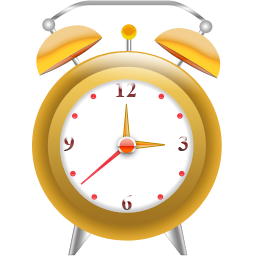
<style>
.page{position:relative;width:256px;height:256px;background:#ffffff}
.page>*{position:absolute;margin:0}
.t1{font:22.3px "TimesNewRomanPS-BoldMT"}
</style>
<div class="page">
<p class="t1" style="left:116px;top:82px;width:20px;height:15px">12</p>
<p class="t1" style="left:64px;top:136px;width:10px;height:15px">9</p>
<p class="t1" style="left:178px;top:136px;width:10px;height:15px">3</p>
<p class="t1" style="left:122px;top:195px;width:10px;height:15px">6</p>
</div>
